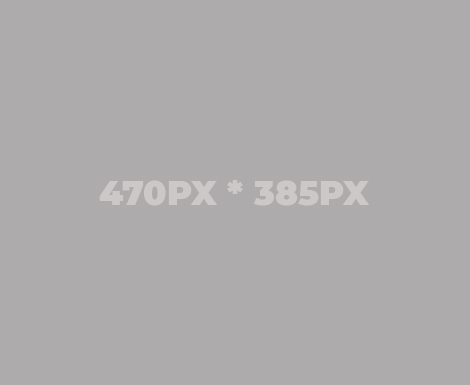
<style>
.page{position:relative;width:470px;height:385px;background:#adabac}
.page>*{position:absolute;margin:0}
.t1{font:34px "Montserrat-Black";color:#ccc8c7}
</style>
<div class="page">
<p class="t1" style="left:99px;top:180px;width:271px;height:26px">470PX * 385PX</p>
</div>
